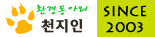
<style>
.page{position:relative;width:155px;height:37px;background:#ffffff}
.page>*{position:absolute;margin:0}
.t1{font:12px/8px "SanBsL";color:#1ac82e;font-weight:bold}
.t2{font:14px/8px "YDISomaM-KSCpc-EUC-H";color:#322c24;font-weight:bold}
.t3{font:14px/8px "Lithos-Regular";color:#000000;font-weight:bold}
</style>
<div class="page">
<p class="t1" style="left:36px;top:4px;width:52px;height:29px;text-align:center">환경동아리<br><br><span class="t2">천지인</span></p>
<p class="t3" style="left:104px;top:5px;width:43px;height:28px;text-align:center">since<br><br>2003</p>
</div>
